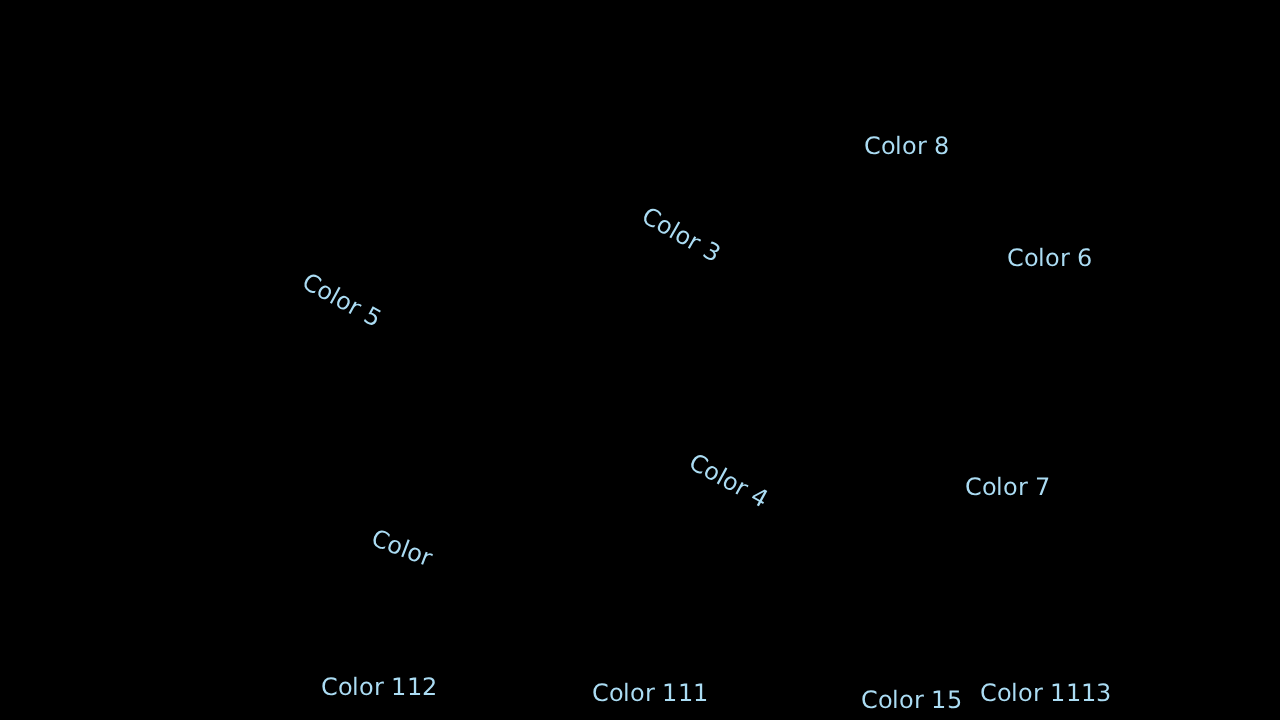
<style>
.page{position:relative;width:1280px;height:720px;background:#000000}
.page>*{position:absolute;margin:0}
.t1{font:24px "DejaVuSans";color:#abdcf3}
</style>
<div class="page">
<p class="t1" style="left:865px;top:135px;width:83px;height:20px">Color 8</p>
<p class="t1" style="left:643px;top:208px;width:78px;height:53px;rotate:29deg">Color 3</p>
<p class="t1" style="left:1008px;top:247px;width:83px;height:20px">Color 6</p>
<p class="t1" style="left:303px;top:273px;width:78px;height:53px;rotate:29deg">Color 5</p>
<p class="t1" style="left:690px;top:454px;width:78px;height:53px;rotate:29deg">Color 4</p>
<p class="t1" style="left:966px;top:476px;width:83px;height:20px">Color 7</p>
<p class="t1" style="left:372px;top:529px;width:61px;height:36px;rotate:21deg">Color</p>
<p class="t1" style="left:322px;top:676px;width:113px;height:20px">Color 112</p>
<p class="t1" style="left:593px;top:682px;width:114px;height:20px">Color 111</p>
<p class="t1" style="left:862px;top:689px;width:99px;height:20px">Color 15</p>
<p class="t1" style="left:981px;top:682px;width:129px;height:20px">Color 1113</p>
</div>
